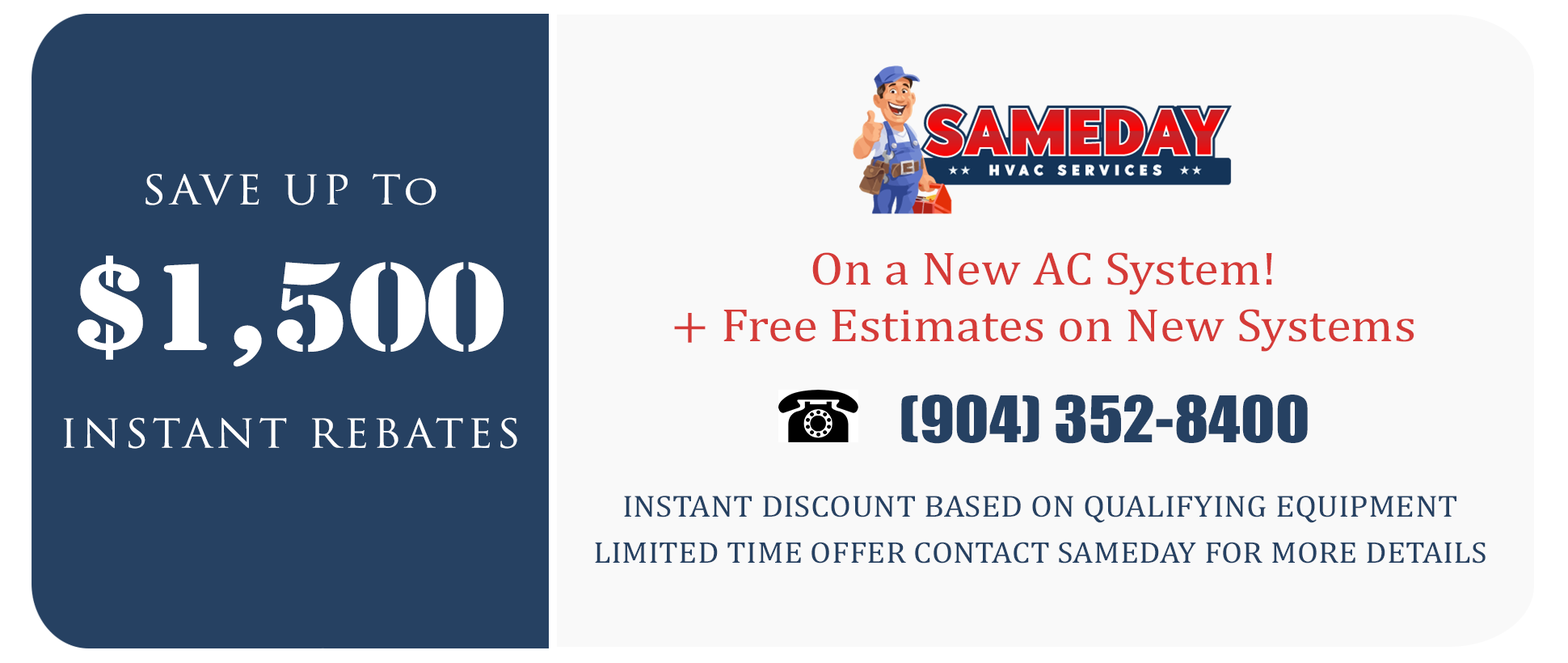
<style>
.page{position:relative;width:1568px;height:663px;background:#f9f9f9}
.page>*{position:absolute;margin:0}
.t1{font:39.5px "TrajanPro-Regular";letter-spacing:0.087em;color:#ffffff;scale:1.08 1}
.t2{font:114.9px "StencilStd";letter-spacing:0.007em;color:#ffffff;scale:1.07 1}
.t3{font:47.3px "CambriaMath";letter-spacing:0.007em;color:#d53b38;scale:1.08 1}
.t4{font:59.1px "Impact";letter-spacing:0.007em;color:#264162;scale:1.08 1}
.t5{font:38.6px "TrajanPro-Regular";letter-spacing:0.09em;color:#ffffff;scale:1.08 1}
.t6{font:30.8px "CambriaMath";letter-spacing:0.007em;color:#264162;scale:1.08 1}
.t7{font:30.3px "CambriaMath";letter-spacing:0.007em;color:#264162;scale:1.07 1}
</style>
<div class="page">
<p class="t1" style="left:145px;top:174px;width:291px;height:31px">SAVE UP To</p>
<p class="t2" style="left:78px;top:255px;width:426px;height:112px">$1,500</p>
<p class="t3" style="left:674px;top:252px;width:740px;height:100px;text-align:center">On a New AC System!<br>+ Free Estimates on New Systems</p>
<p class="t4" style="left:901px;top:394px;width:407px;height:50px">(904) 352-8400</p>
<p class="t5" style="left:63px;top:417px;width:454px;height:32px">INSTANT REBATES</p>
<p class="t6" style="left:624px;top:495px;width:832px;height:28px">INSTANT DISCOUNT BASED ON QUALIFYING EQUIPMENT</p>
<p class="t7" style="left:595px;top:542px;width:891px;height:21px">LIMITED TIME OFFER CONTACT SAMEDAY FOR MORE DETAILS</p>
</div>
